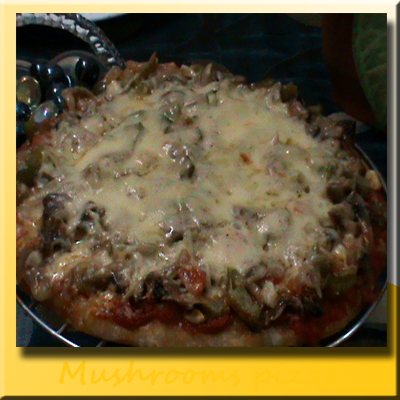
<style>
.page{position:relative;width:400px;height:400px}
.page>*{position:absolute;margin:0}
.t1{font:30px "SegoeScript-Bold";color:#ffc917}
</style>
<div class="page">
<p class="t1" style="left:59px;top:360px;width:284px;height:32px">Mushrooms pizza</p>
</div>
